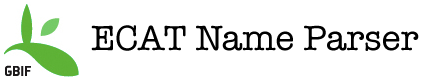
<style>
.page{position:relative;width:445px;height:77px;background:#ffffff}
.page>*{position:absolute;margin:0}
.t1{font:36px "AmericanTypewriter";color:#000000}
</style>
<div class="page">
<p class="t1" style="left:91px;top:25px;width:328px;height:26px">ECAT Name Parser</p>
</div>
